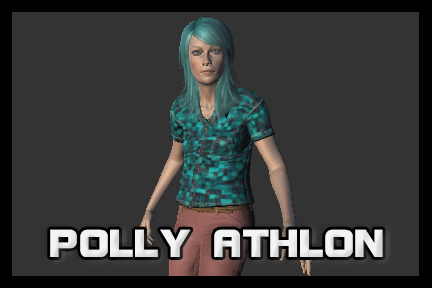
<style>
.page{position:relative;width:432px;height:288px;background:#333333}
.page>*{position:absolute;margin:0}
.t1{font:41.7px "BolsterBold";color:#f3f3f3}
</style>
<div class="page">
<p class="t1" style="left:50px;top:229px;width:333px;height:28px">POLLY ATHLON</p>
</div>
